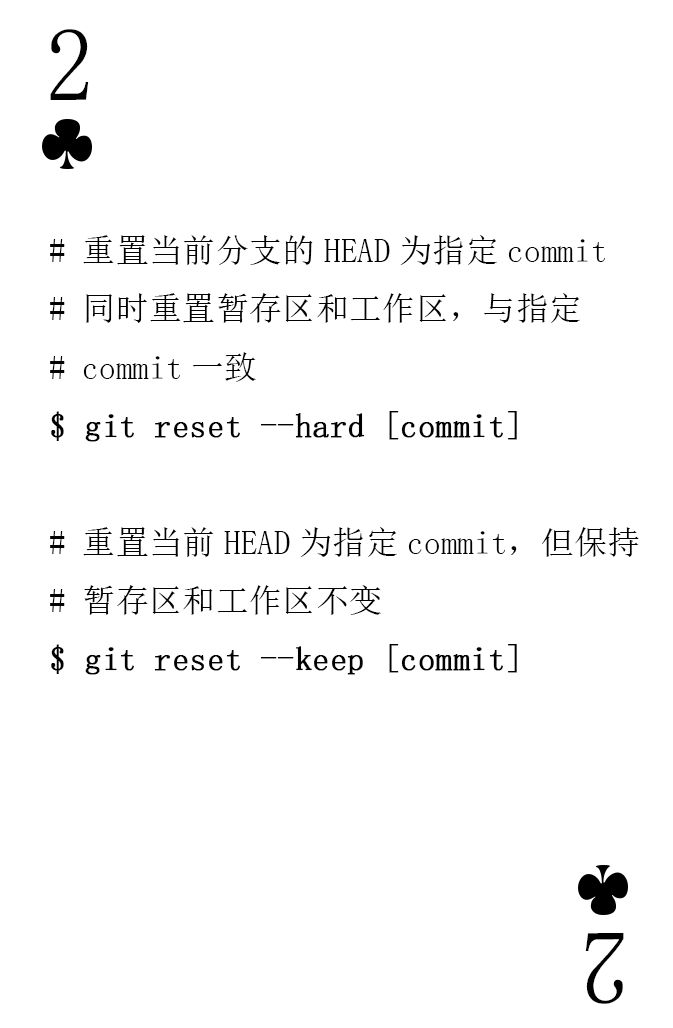
<style>
.page{position:relative;width:673px;height:1028px;background:#ffffff}
.page>*{position:absolute;margin:0}
.t1{font:104.2px "SimSun-ExtB";color:#010101;scale:0.93 1}
.t2{font:33.3px "SimSun";color:#010101}
.t3{font:33.3px "SimSun";color:#010101;font-weight:bold}
</style>
<div class="page">
<p class="t1" style="left:50px;top:29px;width:39px;height:71px">2</p>
<p class="t2" style="left:50px;top:235px;width:589px;height:440px"># 重置当前分支的HEAD为指定commit<br># 同时重置暂存区和工作区，与指定<br># commit一致<br><span class="t3">$ git reset --hard [commit]<br></span><br># 重置当前HEAD为指定commit，但保持<br># 暂存区和工作区不变<br><span class="t3">$ git reset --keep [commit]</span></p>
<p class="t1" style="left:585px;top:933px;width:39px;height:71px;rotate:180deg">2</p>
</div>
